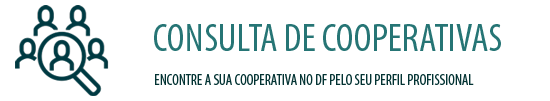
<style>
.page{position:relative;width:550px;height:101px;background:#ffffff}
.page>*{position:absolute;margin:0}
.t1{font:40px "MyriadPro-Cond";color:#267575;text-transform:uppercase}
.t2{font:15px "MyriadPro-Cond";color:#033333;text-transform:uppercase}
</style>
<div class="page">
<p class="t1" style="left:154px;top:24px;width:347px;height:27px">CONSULTA DE COOPERATIVAS</p>
<p class="t2" style="left:155px;top:74px;width:319px;height:11px">ENCONTRE A SUA COOPERATIVA NO df PELO SEU PERFIL PROFISSIONAL</p>
</div>
